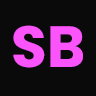
<style>
.page{position:relative;width:96px;height:96px;background:#0b0a0a}
.page>*{position:absolute;margin:0}
.t1{font:58px "Poppins-Bold";color:#fb54fb}
</style>
<div class="page">
<p class="t1" style="left:13px;top:25px;width:70px;height:43px">SB</p>
</div>
